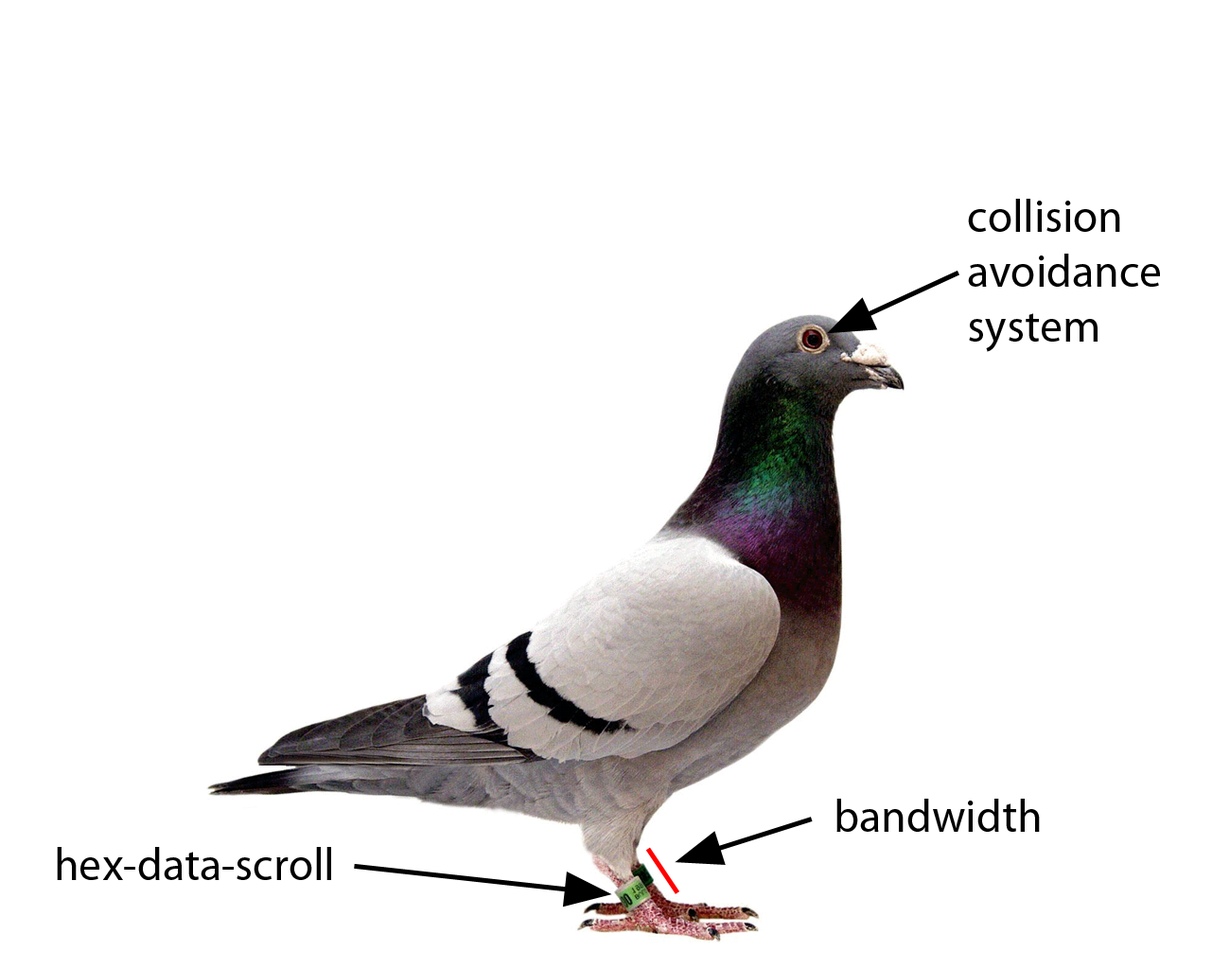
<style>
.page{position:relative;width:1230px;height:969px;background:#ffffff}
.page>*{position:absolute;margin:0}
.t1{font:45.4px "MyriadPro-Regular";color:#000000}
</style>
<div class="page">
<p class="t1" style="left:968px;top:199px;width:192px;height:153px">collision <br>avoidance <br>system</p>
<p class="t1" style="left:837px;top:799px;width:203px;height:33px">bandwidth</p>
<p class="t1" style="left:57px;top:847px;width:274px;height:33px">hex-data-scroll</p>
</div>
